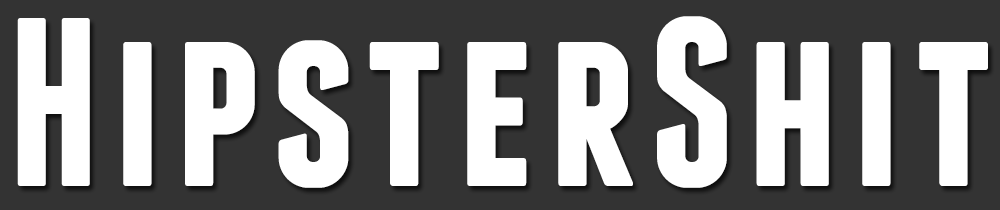
<style>
.page{position:relative;width:1000px;height:210px;background:#333333}
.page>*{position:absolute;margin:0}
.t1{font:240px "Franchise-Bold";letter-spacing:0.05em;color:#ffffff}
</style>
<div class="page">
<p class="t1" style="left:17px;top:16px;width:971px;height:172px">HipsterShit</p>
</div>
